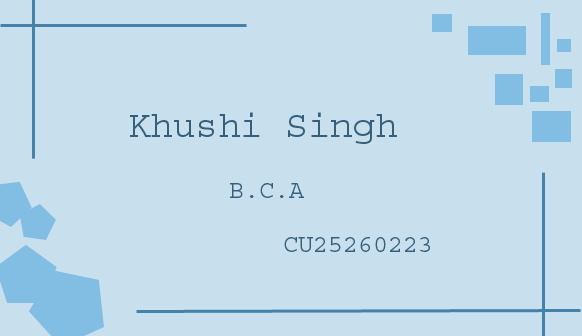
<style>
.page{position:relative;width:582px;height:336px;background:#c8dfee}
.page>*{position:absolute;margin:0}
.t1{font:37.5px "Courier";color:#375f7a}
.t2{font:25px "Courier";color:#375f7a}
</style>
<div class="page">
<p class="t1" style="left:130px;top:112px;width:267px;height:32px">Khushi Singh</p>
<p class="t2" style="left:230px;top:183px;width:74px;height:15px">B.C.A</p>
<p class="t2" style="left:284px;top:237px;width:146px;height:15px">CU25260223</p>
</div>
